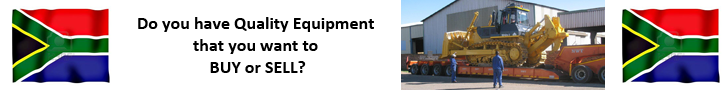
<style>
.page{position:relative;width:728px;height:90px;background:#ffffff}
.page>*{position:absolute;margin:0}
.t1{font:18px "Calibri-Bold";color:#000000}
</style>
<div class="page">
<p class="t1" style="left:138px;top:17px;width:236px;height:56px;text-align:center">Do you have Quality Equipment <br>that you want to <br>BUY or SELL?</p>
</div>
